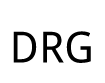
<style>
.page{position:relative;width:105px;height:83px;background:#ffffff}
.page>*{position:absolute;margin:0}
.t1{font:43.1px "DroidSans";color:#000000}
</style>
<div class="page">
<p class="t1" style="left:13px;top:31px;width:78px;height:32px">DRG</p>
</div>
